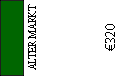
<style>
.page{position:relative;width:124px;height:76px;background:#ffffff}
.page>*{position:absolute;margin:0}
.t1{font:12px "AdobeDevanagari-Regular";color:#000000;scale:0.9 1}
.t2{font:14px "MyriadPro-Regular";color:#000000}
</style>
<div class="page">
<p class="t1" style="left:28px;top:4px;width:8px;height:66px;rotate:-90deg">ALTER MARKT</p>
<p class="t2" style="left:105px;top:24px;width:10px;height:27px;rotate:-90deg">€320</p>
</div>
